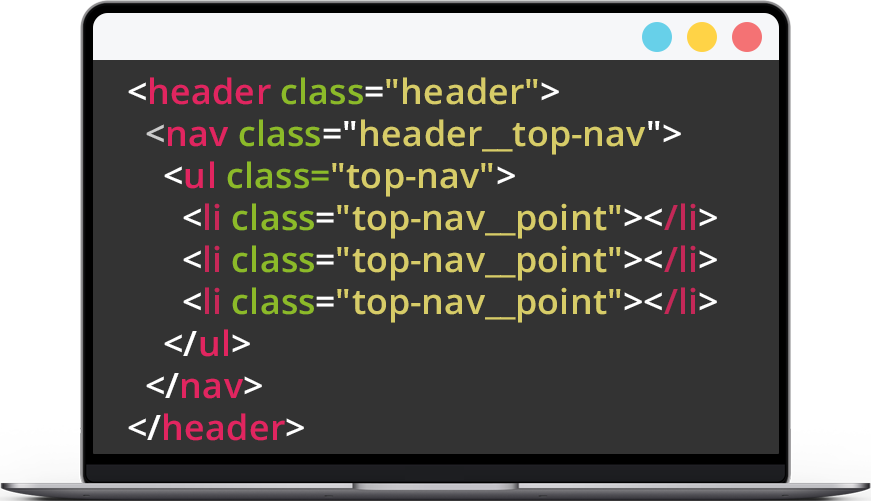
<style>
.page{position:relative;width:871px;height:501px;background:#333333}
.page>*{position:absolute;margin:0}
.t1{font:35px/42px "OpenSans-SemiBold";letter-spacing:0.005em;color:#d7cc68}
.t2{font:35px/42px "OpenSans-SemiBold";letter-spacing:0.005em;color:#ffffff}
.t3{font:35px/42px "OpenSans-SemiBold";letter-spacing:0.005em;color:#e12560}
.t4{font:35px/42px "OpenSans-SemiBold";letter-spacing:0.005em;color:#8cba29}
.t5{font:35px/42px "OpenSans-SemiBold";letter-spacing:0.005em;color:#cbcbcb}
.t6{font:35px/42px "OpenSans-SemiBold";letter-spacing:0.005em;color:#c62858}
.t7{font:35px/42px "OpenSans-SemiBold";letter-spacing:0.005em;color:#c52858}
</style>
<div class="page">
<p class="t1" style="left:128px;top:77px;width:589px;height:364px"><span class="t2">&lt;</span><span class="t3">header </span><span class="t4">class</span><span class="t2">=</span>"header"<span class="t2">&gt;<br>  </span><span class="t5">&lt;</span><span class="t3">nav </span><span class="t4">class</span><span class="t2">="</span>header__top-nav<span class="t2">"&gt;<br>    &lt;</span><span class="t3">ul </span><span class="t4">class=</span>"top-nav"<span class="t2">&gt;<br>      &lt;</span><span class="t6">li </span><span class="t4">class</span><span class="t2">=</span>"top-nav__point"<span class="t2">&gt;&lt;</span><span class="t7">/li</span><span class="t2">&gt;<br>      &lt;</span><span class="t6">li </span><span class="t4">class</span><span class="t2">=</span>"top-nav__point"<span class="t2">&gt;&lt;</span><span class="t7">/li</span><span class="t2">&gt;<br>      &lt;</span><span class="t6">li </span><span class="t4">class</span><span class="t2">=</span>"top-nav__point"<span class="t2">&gt;&lt;</span><span class="t7">/li</span><span class="t2">&gt;<br>    &lt;/</span><span class="t3">ul</span><span class="t2">&gt;<br>  &lt;/</span><span class="t3">nav</span><span class="t2">&gt;<br>&lt;/</span><span class="t3">header</span><span class="t2">&gt;</span></p>
</div>
